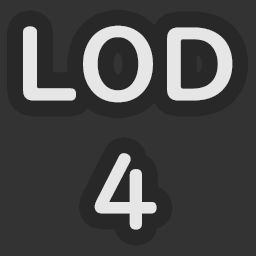
<style>
.page{position:relative;width:256px;height:256px;background:#333333}
.page>*{position:absolute;margin:0}
.t1{font:100px/128px "UDDigiKyokashoNK-B";color:#e6e6e6}
</style>
<div class="page">
<p class="t1" style="left:23px;top:25px;width:210px;height:205px;text-align:center">LOD<br>4</p>
</div>
